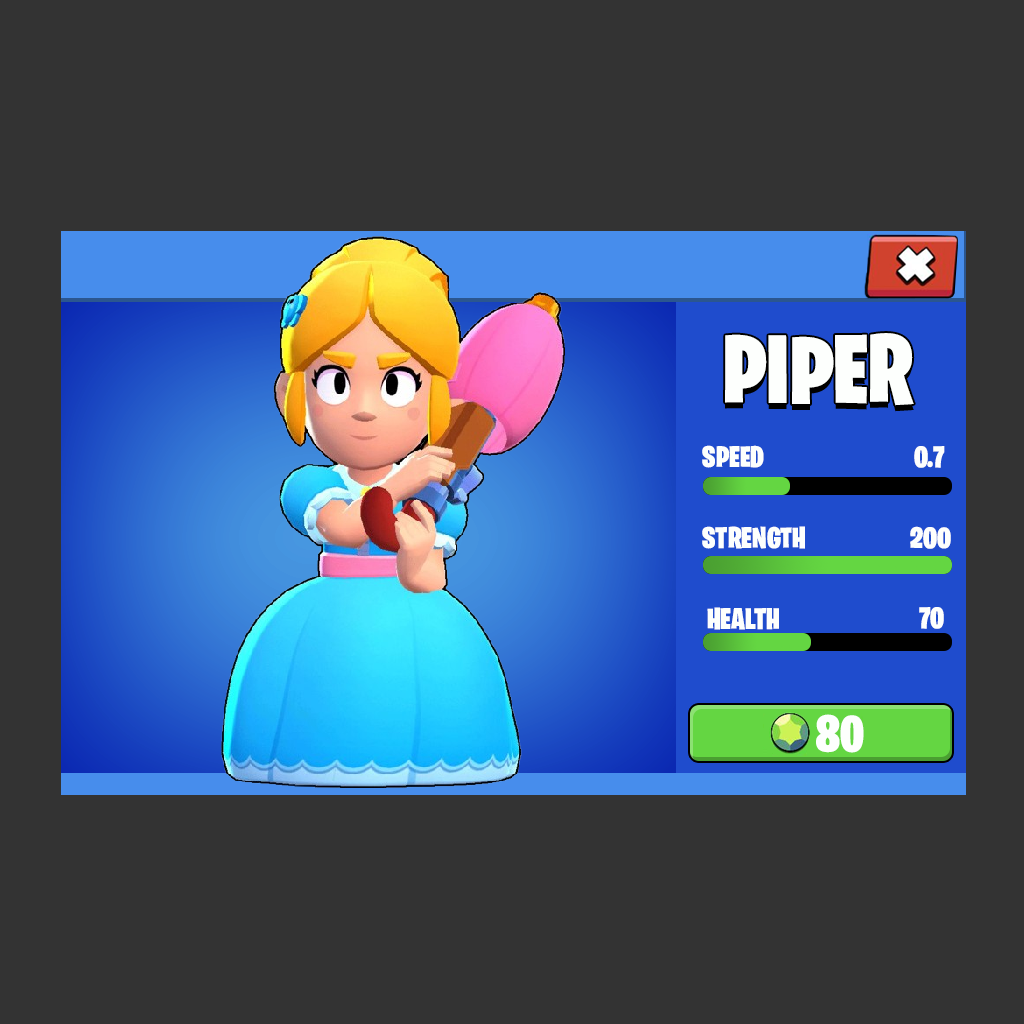
<style>
.page{position:relative;width:1024px;height:1024px;background:#333333}
.page>*{position:absolute;margin:0}
.t1{font:97.7px "BurbankBigCondensed-Black";color:#fdfffd}
.t2{font:30px "BurbankBigCondensed-Black";color:#fdfffd}
.t3{font:51px "BurbankBigCondensed-Black";color:#fdfffd}
</style>
<div class="page">
<p class="t1" style="left:725px;top:333px;width:189px;height:73px">PIPER</p>
<p class="t2" style="left:702px;top:445px;width:62px;height:23px">SPEED</p>
<p class="t2" style="left:914px;top:446px;width:31px;height:22px">0.7</p>
<p class="t2" style="left:702px;top:526px;width:103px;height:23px">STRENGTH</p>
<p class="t2" style="left:910px;top:526px;width:41px;height:23px">200</p>
<p class="t2" style="left:707px;top:607px;width:72px;height:23px">HEALTH</p>
<p class="t2" style="left:919px;top:607px;width:25px;height:22px">70</p>
<p class="t3" style="left:816px;top:714px;width:48px;height:39px">80</p>
</div>
